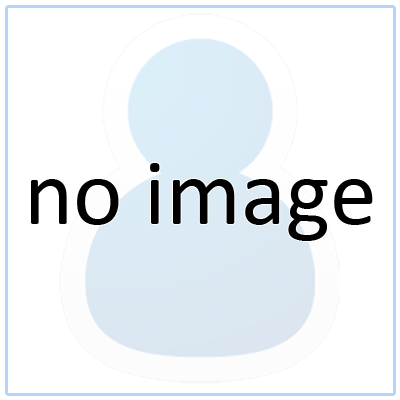
<style>
.page{position:relative;width:400px;height:400px;background:#ffffff}
.page>*{position:absolute;margin:0}
.t1{font:94px "Calibri";color:#000000}
</style>
<div class="page">
<p class="t1" style="left:31px;top:163px;width:342px;height:78px">no image</p>
</div>
